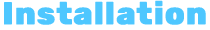
<style>
.page{position:relative;width:210px;height:30px;background:#ffffff}
.page>*{position:absolute;margin:0}
.t1{font:31.4px "Rubik-ExtraBold";letter-spacing:0.02em;color:#4ec7ff;font-weight:bold}
</style>
<div class="page">
<p class="t1" style="left:4px;top:0px;width:202px;height:25px">Installation</p>
</div>
